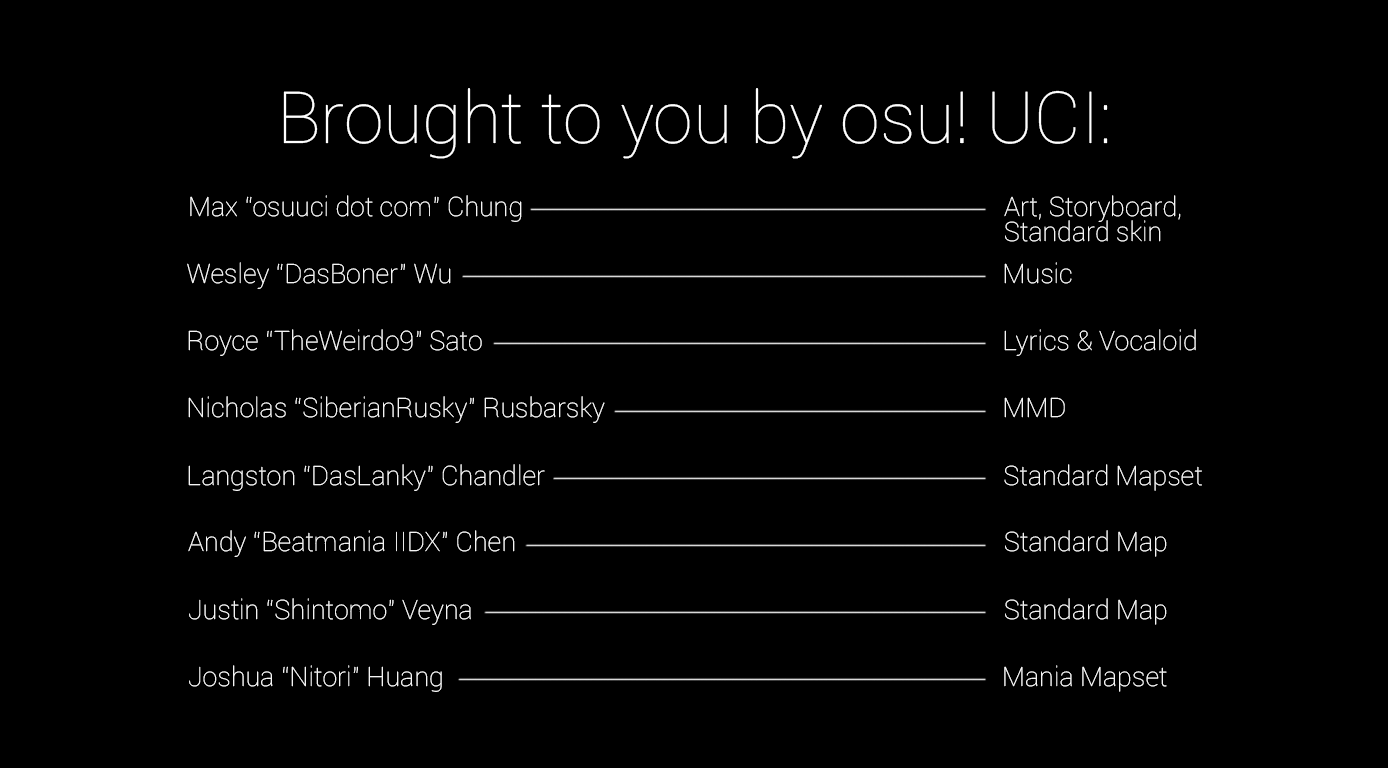
<style>
.page{position:relative;width:1388px;height:768px;background:#000000}
.page>*{position:absolute;margin:0}
.t1{font:72px "Roboto-Thin";color:#ffffff}
.t2{font:26.9px "Roboto-Thin";color:#ffffff}
.t3{font:26.9px/25.5px "Roboto-Thin";color:#ffffff}
</style>
<div class="page">
<p class="t1" style="left:283px;top:88px;width:825px;height:71px">Brought to you by osu! UCI:</p>
<p class="t2" style="left:190px;top:195px;width:332px;height:27px">Max “osuuci dot com” Chung</p>
<p class="t3" style="left:1004px;top:195px;width:177px;height:47px">Art, Storyboard,<br>Standard skin</p>
<p class="t2" style="left:187px;top:262px;width:264px;height:27px">Wesley “DasBoner” Wu</p>
<p class="t2" style="left:1004px;top:262px;width:68px;height:22px">Music</p>
<p class="t2" style="left:188px;top:329px;width:294px;height:27px">Royce “TheWeirdo9” Sato</p>
<p class="t2" style="left:1004px;top:329px;width:192px;height:27px">Lyrics &amp; Vocaloid</p>
<p class="t2" style="left:188px;top:396px;width:417px;height:27px">Nicholas “SiberianRusky” Rusbarsky</p>
<p class="t2" style="left:1004px;top:397px;width:61px;height:21px">MMD</p>
<p class="t2" style="left:188px;top:464px;width:357px;height:27px">Langston “DasLanky” Chandler</p>
<p class="t2" style="left:1004px;top:464px;width:198px;height:27px">Standard Mapset</p>
<p class="t2" style="left:188px;top:530px;width:327px;height:27px">Andy “Beatmania IIDX” Chen</p>
<p class="t2" style="left:1005px;top:530px;width:162px;height:27px">Standard Map</p>
<p class="t2" style="left:189px;top:598px;width:282px;height:27px">Justin “Shintomo” Veyna</p>
<p class="t2" style="left:1005px;top:598px;width:162px;height:27px">Standard Map</p>
<p class="t2" style="left:189px;top:665px;width:253px;height:27px">Joshua “Nitori” Huang</p>
<p class="t2" style="left:1004px;top:665px;width:163px;height:27px">Mania Mapset</p>
</div>
